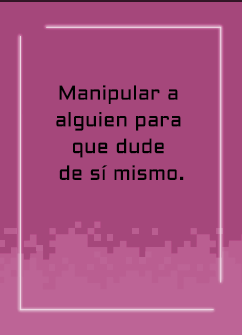
<style>
.page{position:relative;width:242px;height:335px;background:#a5477b}
.page>*{position:absolute;margin:0}
.t1{font:20px/26.7px "Aldrich-Regular";letter-spacing:0.015em;color:#000000}
</style>
<div class="page">
<p class="t1" style="left:56px;top:85px;width:128px;height:95px;text-align:center">Manipular a <br>alguien para <br>que dude <br>de sí mismo.</p>
</div>
